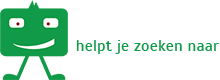
<style>
.page{position:relative;width:220px;height:80px;background:#ffffff}
.page>*{position:absolute;margin:0}
.t1{font:16.2px "Scada-Regular";color:#119b49}
</style>
<div class="page">
<p class="t1" style="left:76px;top:40px;width:143px;height:14px">helpt je zoeken naar</p>
</div>
